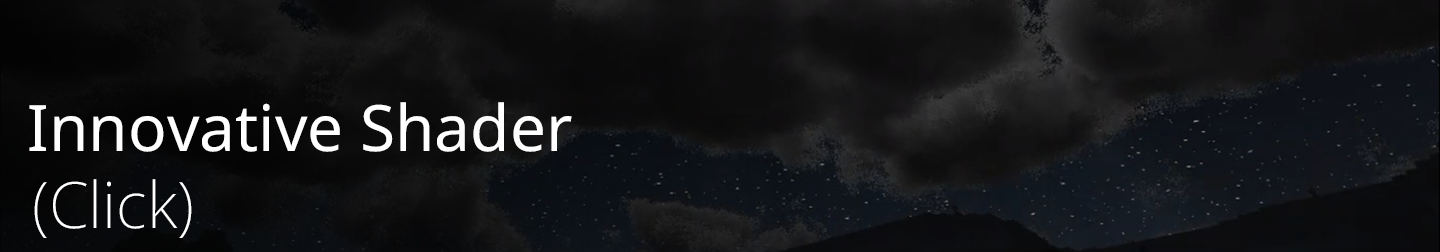
<style>
.page{position:relative;width:1440px;height:252px}
.page>*{position:absolute;margin:0}
.t1{font:64px "NotoSans-Regular";color:#ffffff}
.t2{font:64px "NotoSans-ExtraLight";color:#ffffff}
</style>
<div class="page">
<p class="t1" style="left:29px;top:102px;width:543px;height:50px">Innovative Shader</p>
<p class="t2" style="left:34px;top:179px;width:158px;height:59px">(Click)</p>
</div>
